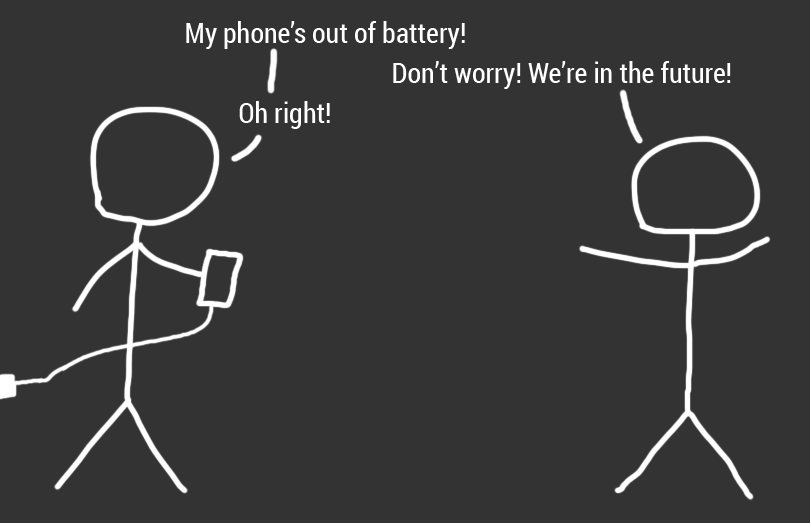
<style>
.page{position:relative;width:810px;height:523px;background:#333333}
.page>*{position:absolute;margin:0}
.t1{font:28px "RobotoCondensed-Regular";color:#ffffff}
</style>
<div class="page">
<p class="t1" style="left:186px;top:21px;width:279px;height:28px">My phone’s out of battery!</p>
<p class="t1" style="left:393px;top:61px;width:338px;height:28px">Don’t worry! We’re in the future!</p>
<p class="t1" style="left:239px;top:101px;width:91px;height:28px">Oh right!</p>
</div>
